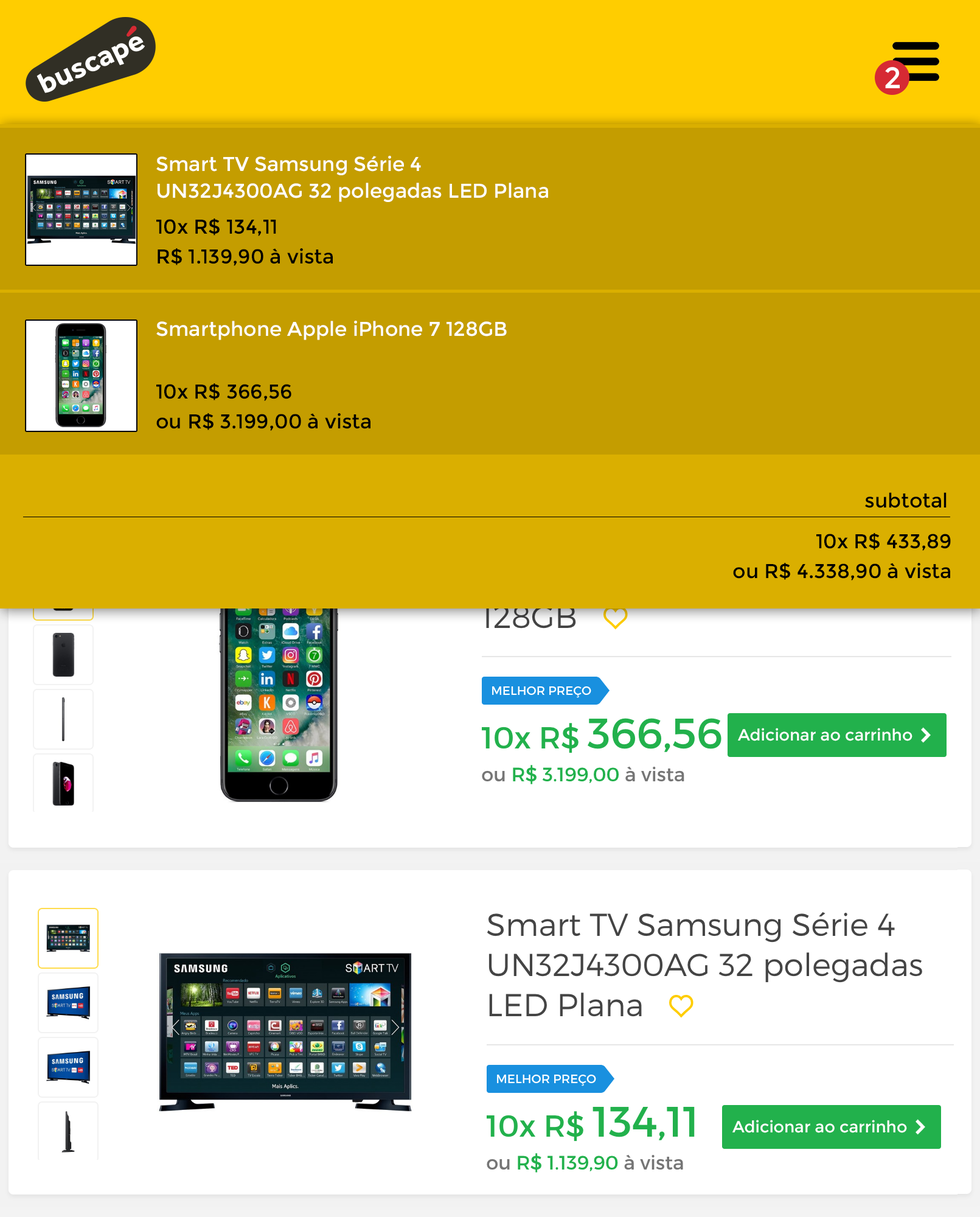
<style>
.page{position:relative;width:980px;height:1217px;background:#ffffff}
.page>*{position:absolute;margin:0}
.t1{font:29.5px "Montserrat-Regular";color:#ffffff}
.t2{font:20.1px/26.8px "Montserrat-Regular";color:#ffffff}
.t3{font:20.1px/29.2px "Montserrat-Regular";color:#000000}
.t4{font:20.1px "Montserrat-Regular";color:#ffffff}
.t5{font:20.1px "Montserrat-Regular";color:#000000}
</style>
<div class="page">
<p class="t1" style="left:885px;top:67px;width:15px;height:21px">2</p>
<p class="t2" style="left:156px;top:156px;width:392px;height:46px">Smart TV Samsung Série 4 <br>UN32J4300AG 32 polegadas LED Plana</p>
<p class="t3" style="left:156px;top:218px;width:177px;height:48px">10x R$ 134,11<br>R$ 1.139,90 à vista</p>
<p class="t4" style="left:156px;top:321px;width:351px;height:19px">Smartphone Apple iPhone 7 128GB</p>
<p class="t3" style="left:156px;top:383px;width:214px;height:48px">10x R$ 366,56<br>ou R$ 3.199,00 à vista</p>
<p class="t5" style="left:865px;top:492px;width:82px;height:16px">subtotal</p>
<p class="t3" style="left:733px;top:533px;width:218px;height:47px;text-align:right">10x R$ 433,89<br>ou R$ 4.338,90 à vista</p>
</div>
